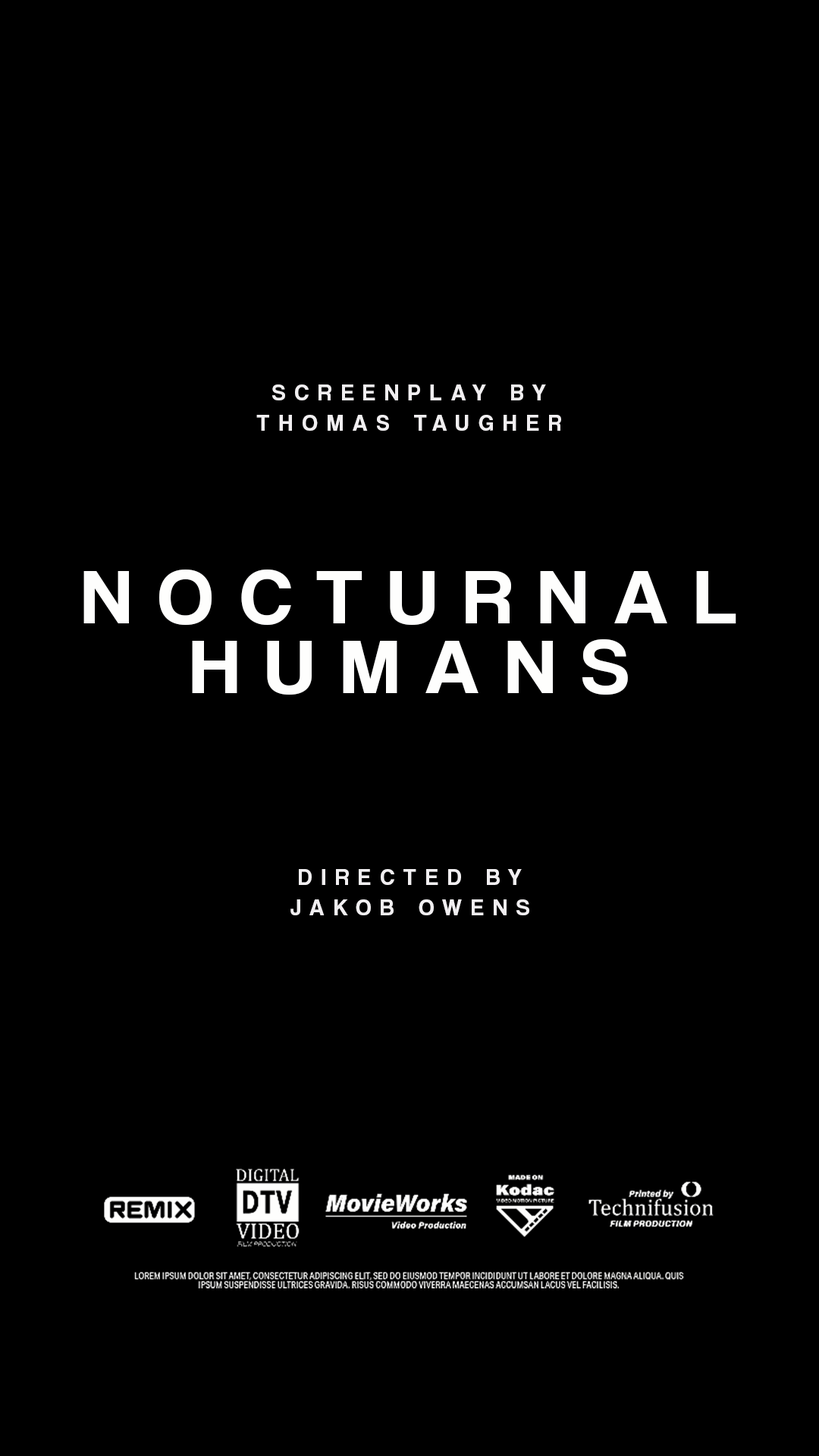
<style>
.page{position:relative;width:819px;height:1456px;background:#000000}
.page>*{position:absolute;margin:0}
.t1{font:22.9px/30.6px "CoolveticaRg-Regular";letter-spacing:0.42em;color:#f1eff1}
.t2{font:79.2px/69.7px "CoolveticaRg-Regular";letter-spacing:0.32em;color:#fefefd;scale:1.05 1}
</style>
<div class="page">
<p class="t1" style="left:256px;top:384px;width:305px;height:47px;text-align:center">SCREENPLAY BY<br>THOMAS TAUGHER</p>
<p class="t2" style="left:83px;top:570px;width:653px;height:125px;text-align:center">NOCTURNAL<br>HUMANS</p>
<p class="t1" style="left:290px;top:869px;width:239px;height:46px;text-align:center">DIRECTED BY<br>JAKOB OWENS</p>
</div>
